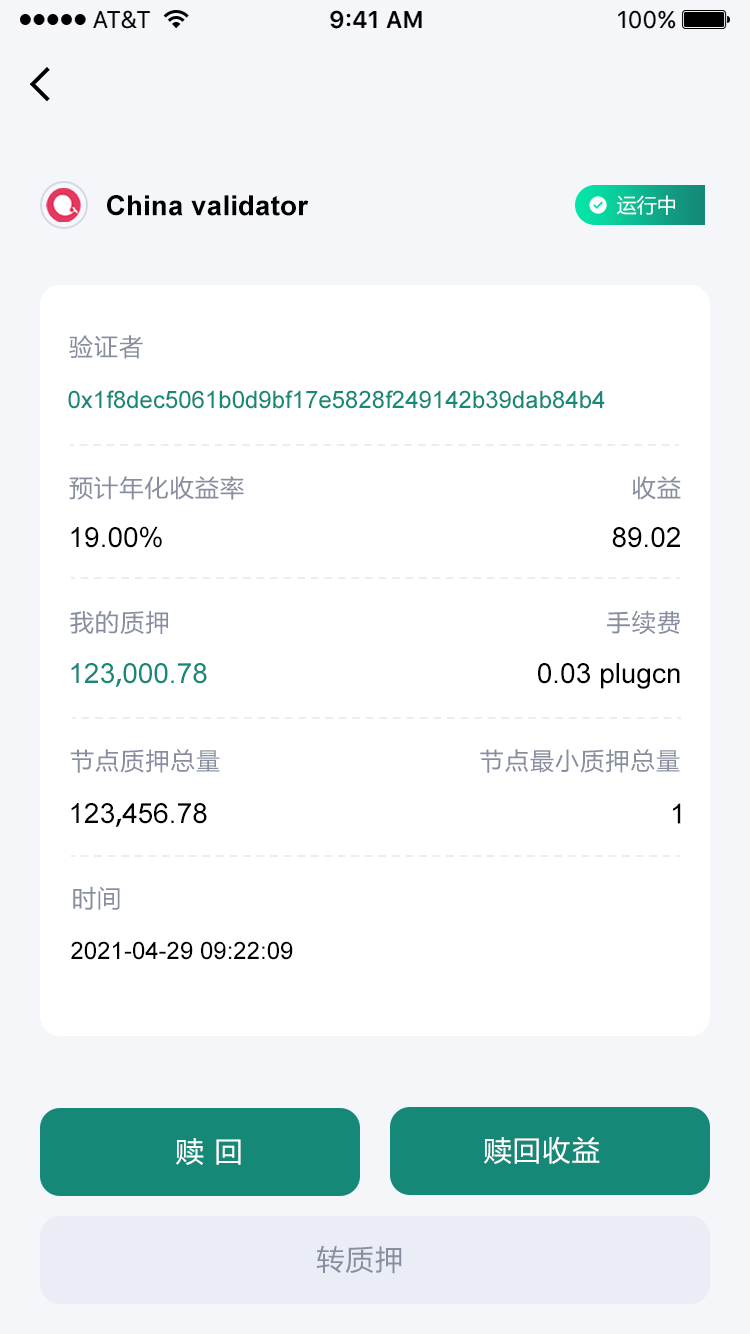
<style>
.page{position:relative;width:750px;height:1334px;background:#ffffff}
.page>*{position:absolute;margin:0}
.t1{font:28px "Arial-BoldMT";color:#000000}
.t2{font:20px "MicrosoftYaHei";color:#ffffff}
.t3{font:24px "MicrosoftYaHei";letter-spacing:0.05em;color:#878e9f}
.t4{font:24px "ArialMT";color:#158878}
.t5{font:28px "ArialMT";color:#000000}
.t6{font:28px "ArialMT";color:#158878}
.t7{font:28px "AdobeHeitiStd-Regular";color:#158878}
.t8{font:28px "AdobeHeitiStd-Regular";color:#000000}
.t9{font:24px "ArialMT";color:#000000}
.t10{font:28px "MicrosoftYaHei";letter-spacing:0.05em;color:#ffffff}
.t11{font:28px "MicrosoftYaHei";letter-spacing:0.05em;color:#878e9f}
</style>
<div class="page">
<p class="t1" style="left:107px;top:195px;width:202px;height:21px">China validator</p>
<p class="t2" style="left:617px;top:195px;width:58px;height:20px">运行中</p>
<p class="t3" style="left:69px;top:335px;width:74px;height:24px">验证者</p>
<p class="t4" style="left:68px;top:390px;width:537px;height:19px">0x1f8dec5061b0d9bf17e5828f249142b39dab84b4</p>
<p class="t3" style="left:69px;top:476px;width:175px;height:24px">预计年化收益率</p>
<p class="t3" style="left:632px;top:476px;width:49px;height:24px">收益</p>
<p class="t5" style="left:71px;top:526px;width:91px;height:22px">19.00%</p>
<p class="t5" style="left:612px;top:527px;width:68px;height:21px">89.02</p>
<p class="t3" style="left:70px;top:610px;width:98px;height:24px">我的质押</p>
<p class="t3" style="left:607px;top:610px;width:73px;height:25px">手续费</p>
<p class="t6" style="left:71px;top:663px;width:136px;height:24px">123<span class="t7">,</span>000.78</p>
<p class="t5" style="left:538px;top:663px;width:142px;height:26px">0.03 plugcn</p>
<p class="t3" style="left:70px;top:749px;width:150px;height:24px">节点质押总量</p>
<p class="t3" style="left:480px;top:749px;width:200px;height:24px">节点最小质押总量</p>
<p class="t5" style="left:71px;top:803px;width:136px;height:24px">123<span class="t8">,</span>456.78</p>
<p class="t5" style="left:673px;top:803px;width:8px;height:21px">1</p>
<p class="t3" style="left:73px;top:886px;width:47px;height:24px">时间</p>
<p class="t9" style="left:71px;top:941px;width:222px;height:19px">2021-04-29 09:22:09</p>
<p class="t10" style="left:176px;top:1138px;width:65px;height:27px">赎 回</p>
<p class="t10" style="left:484px;top:1136px;width:116px;height:28px">赎回收益</p>
<p class="t11" style="left:316px;top:1245px;width:86px;height:29px">转质押</p>
</div>
